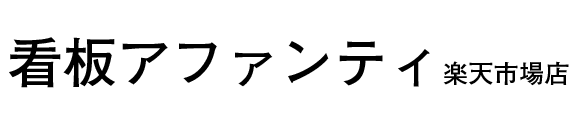
<style>
.page{position:relative;width:579px;height:121px;background:#ffffff}
.page>*{position:absolute;margin:0}
.t1{font:54.2px "GFutoGoB101Pro-Bold";color:#000000;text-transform:uppercase}
.t2{font:25.5px "GFutoGoB101Pro-Bold";color:#000000;text-transform:uppercase}
</style>
<div class="page">
<p class="t1" style="left:9px;top:37px;width:560px;height:51px">看板アファンティ<span class="t2">楽天市場店</span></p>
</div>
